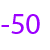
<style>
.page{position:relative;width:50px;height:50px;background:#ffffff}
.page>*{position:absolute;margin:0}
.t1{font:30px "MyriadPro-Regular";color:#9c00ff}
</style>
<div class="page">
<p class="t1" style="left:1px;top:14px;width:39px;height:20px">-50</p>
</div>
